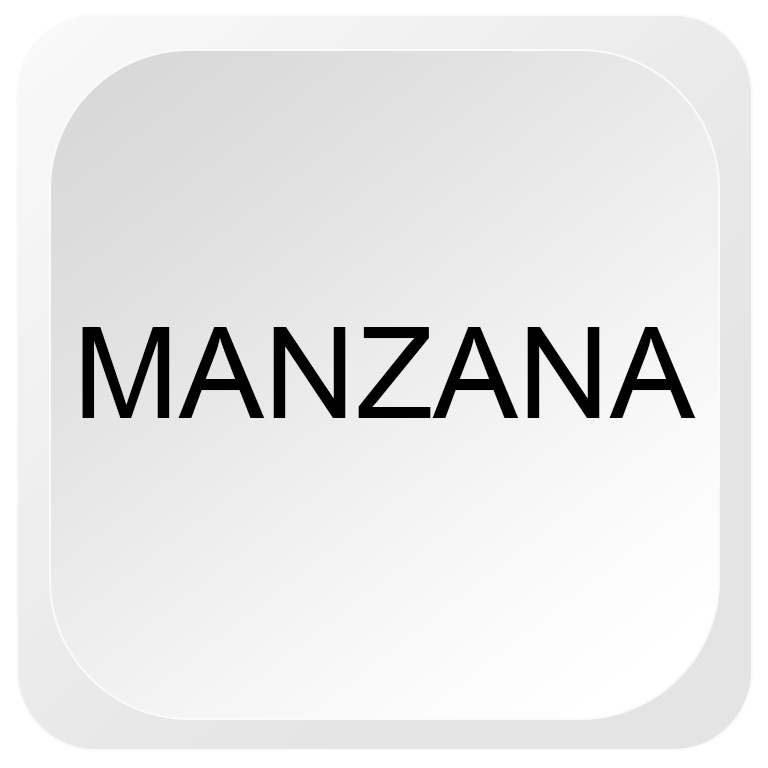
<style>
.page{position:relative;width:768px;height:768px}
.page>*{position:absolute;margin:0}
.t1{font:127px "ArialMT";color:#000000}
</style>
<div class="page">
<p class="t1" style="left:82px;top:327px;width:614px;height:91px">MANZANA</p>
</div>
